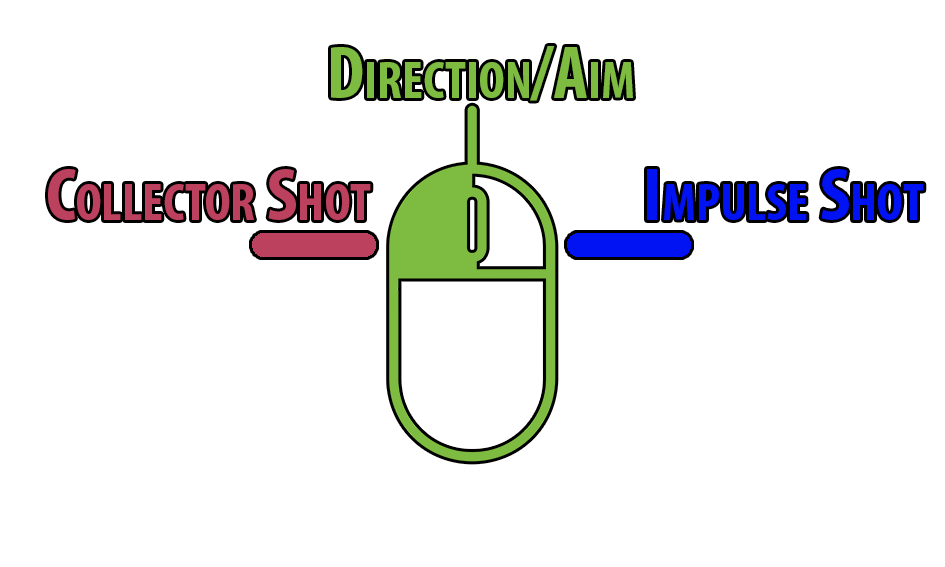
<style>
.page{position:relative;width:945px;height:567px;background:#ffffff}
.page>*{position:absolute;margin:0}
.t1{font:75.4px "MyriadPro-BoldCond";color:#bb415e;font-variant:small-caps}
.t2{font:75.4px "MyriadPro-BoldCond";color:#0213f3;font-variant:small-caps}
</style>
<div class="page">
<p class="t1" style="left:48px;top:169px;width:323px;height:51px">Collector Shot</p>
<p class="t2" style="left:647px;top:169px;width:277px;height:51px">Impulse Shot</p>
</div>
